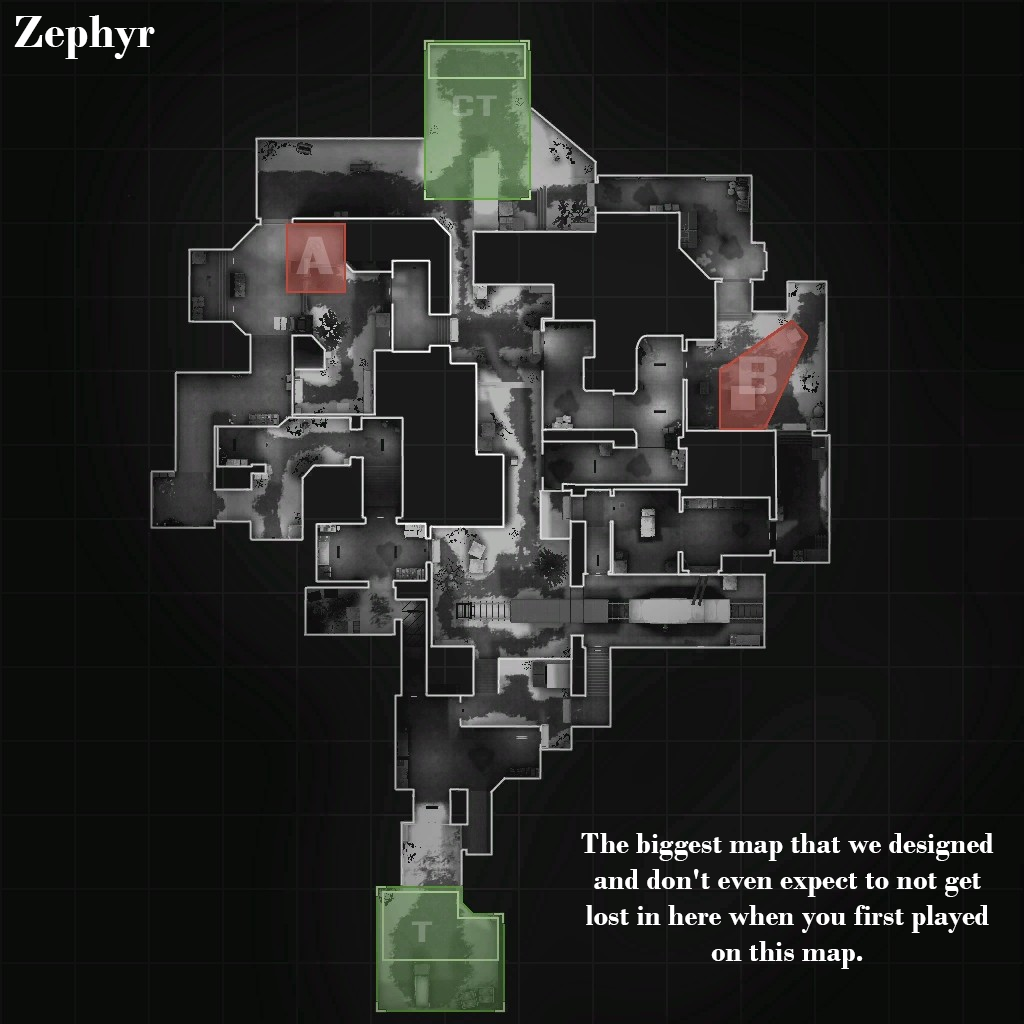
<style>
.page{position:relative;width:1024px;height:1024px}
.page>*{position:absolute;margin:0}
.t1{font:48px "BodoniMT-Bold";color:#ffffff}
.t2{font:30px "BodoniMT-Bold";color:#ffffff}
</style>
<div class="page">
<p class="t1" style="left:14px;top:15px;width:141px;height:44px">Zephyr</p>
<p class="t2" style="left:581px;top:833px;width:413px;height:136px;text-align:center">The biggest map that we designed and don't even expect to not get lost in here when you first played on this map.</p>
</div>
